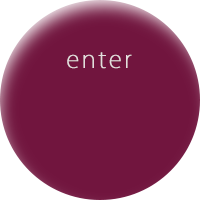
<style>
.page{position:relative;width:200px;height:200px;background:#71153e}
.page>*{position:absolute;margin:0}
.t1{font:24px "KozGoPr6N-ExtraLight";letter-spacing:0.075em;color:#e4dddd;font-weight:bold}
</style>
<div class="page">
<p class="t1" style="left:67px;top:52px;width:65px;height:17px">enter</p>
</div>
